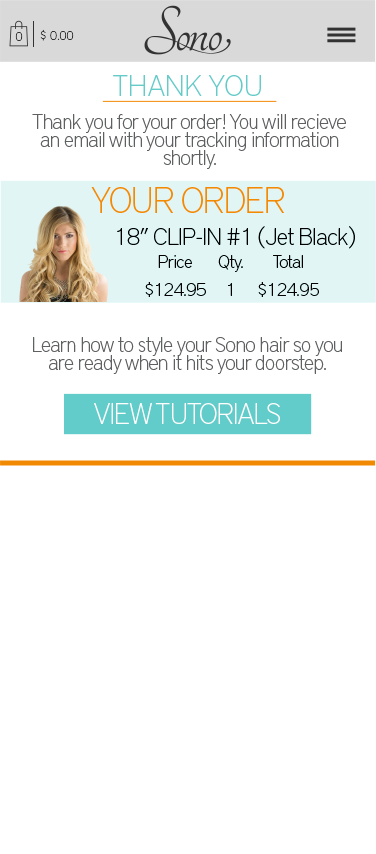
<style>
.page{position:relative;width:376px;height:854px;background:#ffffff}
.page>*{position:absolute;margin:0}
.t1{font:12.4px "DistrictPro-Thin";color:#323232}
.t2{font:30px "DistrictPro-Thin";color:#65cbc9}
.t3{font:21px/18px "DistrictPro-Thin";letter-spacing:-0.031em;color:#5f6062}
.t4{font:36px "DistrictPro-Thin";letter-spacing:-0.031em;color:#f38b00}
.t5{font:24px "DistrictPro-Thin";letter-spacing:-0.031em;color:#000000}
.t6{font:18px/14px "DistrictPro-Thin";letter-spacing:-0.031em;color:#000000}
.t7{font:28.6px "DistrictPro-Thin";letter-spacing:-0.031em;color:#ffffff}
</style>
<div class="page">
<p class="t1" style="left:40px;top:29px;width:34px;height:12px">$ 0.00</p>
<p class="t1" style="left:15px;top:32px;width:8px;height:9px">0</p>
<p class="t2" style="left:113px;top:75px;width:148px;height:21px">THANK YOU</p>
<p class="t3" style="left:32px;top:114px;width:314px;height:55px;text-align:center">Thank you for your order! You will recieve an email with your tracking information shortly.</p>
<p class="t4" style="left:91px;top:187px;width:193px;height:26px">YOUR ORDER</p>
<p class="t5" style="left:117px;top:226px;width:238px;height:23px">18” CLIP-IN #1 (Jet Black)</p>
<p class="t6" style="left:145px;top:255px;width:61px;height:42px;text-align:center">Price<br><br>$124.95</p>
<p class="t6" style="left:218px;top:255px;width:25px;height:41px;text-align:center">Qty.<br><br>1</p>
<p class="t6" style="left:258px;top:255px;width:61px;height:42px;text-align:center">Total<br><br>$124.95</p>
<p class="t3" style="left:33px;top:337px;width:309px;height:37px;text-align:center">Learn how to style your Sono hair so you are ready when it hits your doorstep.</p>
<p class="t7" style="left:94px;top:403px;width:186px;height:21px">VIEW TUTORIALS</p>
</div>
